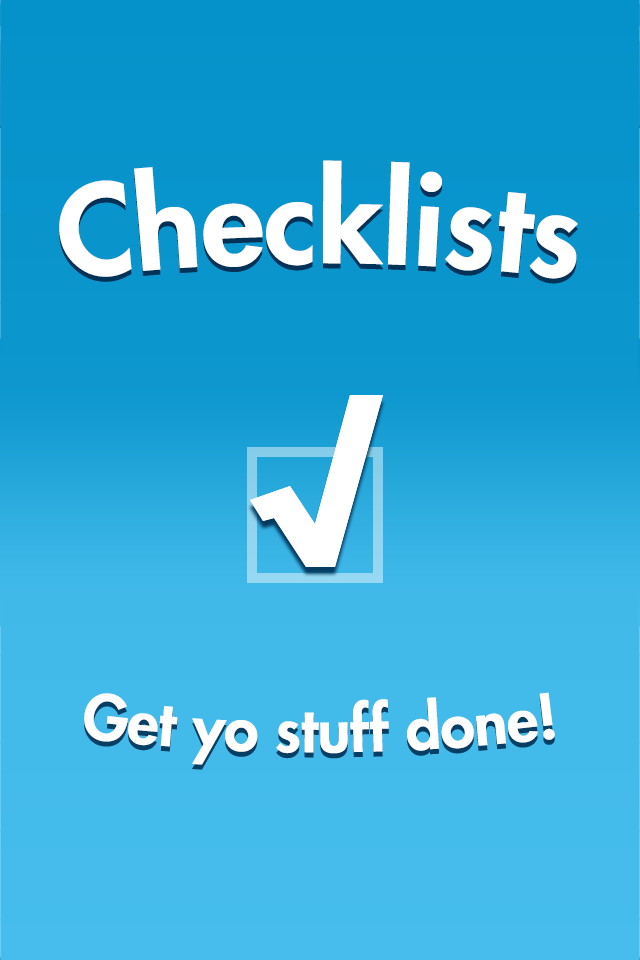
<style>
.page{position:relative;width:640px;height:960px}
.page>*{position:absolute;margin:0}
.t1{font:120.9px "FuturaLT-Heavy";color:#ffffff}
.t2{font:59.8px "FuturaLT-Heavy";color:#ffffff}
</style>
<div class="page">
<p class="t1" style="left:59px;top:160px;width:519px;height:119px">Checklists</p>
<p class="t2" style="left:84px;top:692px;width:471px;height:73px">Get yo stuff done!</p>
</div>
